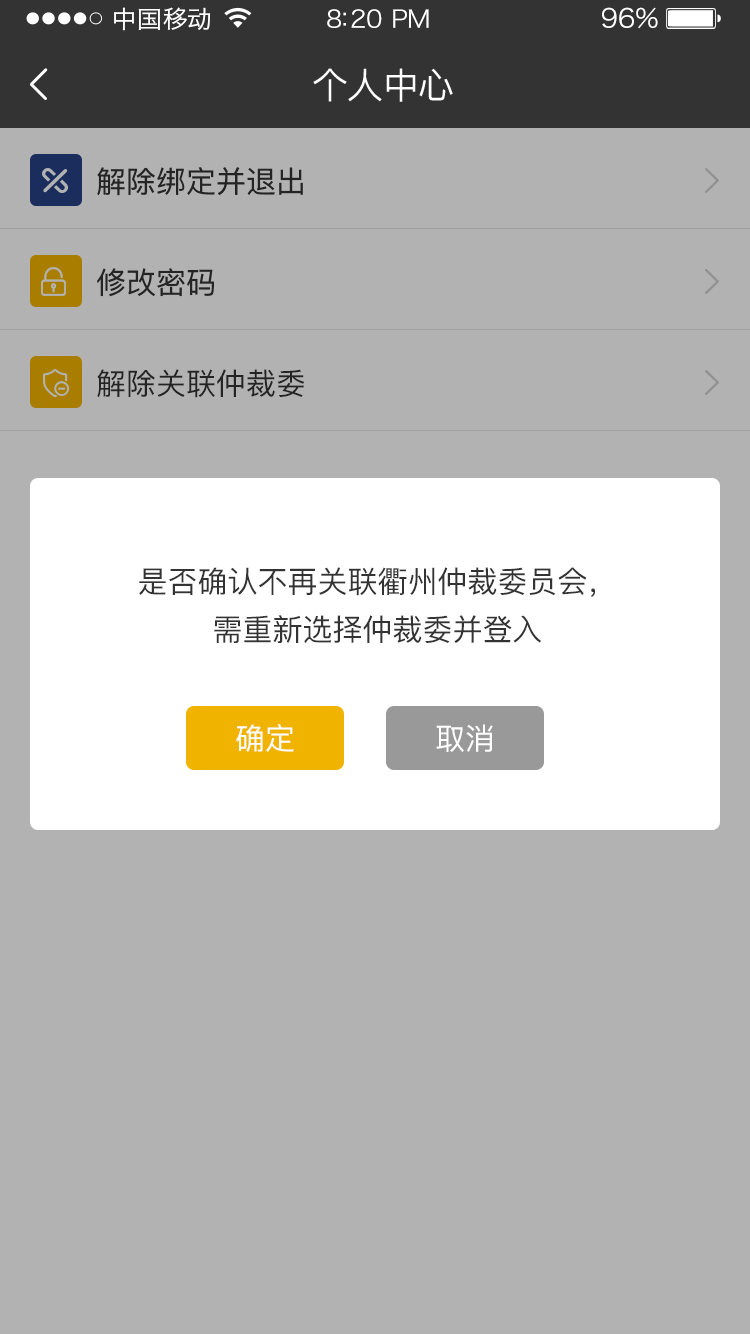
<style>
.page{position:relative;width:750px;height:1334px;background:#b2b2b2}
.page>*{position:absolute;margin:0}
.t1{font:24px "HiraginoSansGB-W3";letter-spacing:0.02em;color:#ffffff;scale:1.03 1}
.t2{font:24px "HiraginoSansGB-W3";letter-spacing:-0.02em;color:#ffffff;scale:1.03 1}
.t3{font:26.2px "HiraginoSansGB-W3";letter-spacing:-0.02em;color:#ffffff;scale:1.03 1}
.t4{font:36px "PingFangSC-Regular";letter-spacing:-0.02em;color:#ffffff}
.t5{font:30px "PingFangSC-Regular";color:#333333}
.t6{font:30px "PingFang-SC-Medium";color:#333333}
.t7{font:30px/48px "PingFang-SC-Medium";color:#333333}
.t8{font:30px "PingFang-SC-Medium";color:#ffffff}
</style>
<div class="page">
<p class="t1" style="left:114px;top:7px;width:97px;height:24px">中国移动</p>
<p class="t2" style="left:327px;top:9px;width:102px;height:19px">8:20 PM</p>
<p class="t3" style="left:602px;top:7px;width:56px;height:22px">96%</p>
<p class="t4" style="left:313px;top:68px;width:140px;height:34px">个人中心</p>
<p class="t5" style="left:97px;top:167px;width:206px;height:29px">解除绑定并退出</p>
<p class="t5" style="left:97px;top:268px;width:117px;height:29px">修改密码</p>
<p class="t6" style="left:97px;top:369px;width:207px;height:29px">解除关联仲裁委</p>
<p class="t7" style="left:139px;top:567px;width:456px;height:76px;text-align:center">是否确认不再关联衢州仲裁委员会，<br>需重新选择仲裁委并登入</p>
<p class="t8" style="left:236px;top:724px;width:58px;height:28px">确定</p>
<p class="t8" style="left:436px;top:724px;width:57px;height:28px">取消</p>
</div>
